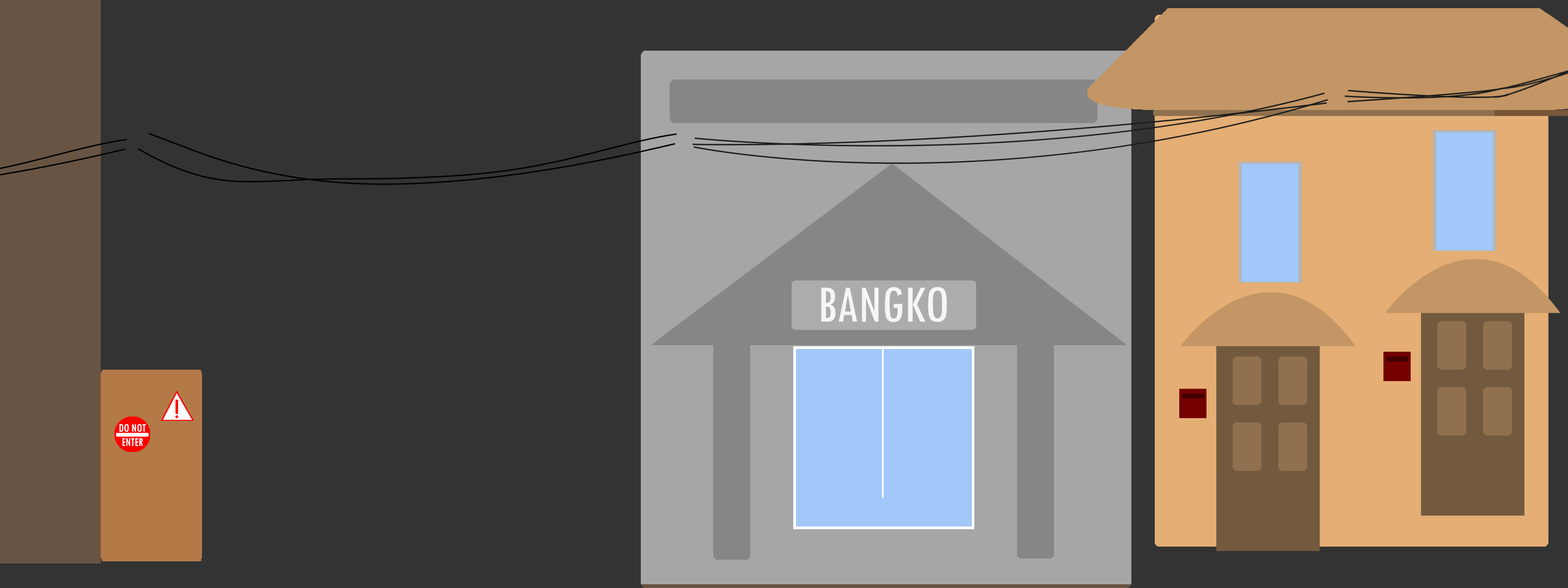
<style>
.page{position:relative;width:1568px;height:588px;background:#333333}
.page>*{position:absolute;margin:0}
.t1{font:54.4px "TwCenMT-Condensed";color:#f6f6f6}
.t2{font:29.9px "TwCenMT-Condensed";color:#ff0000}
</style>
<div class="page">
<p class="t1" style="left:821px;top:287px;width:126px;height:35px">BANGKO</p>
<p class="t2" style="left:175px;top:400px;width:4px;height:18px">!</p>
</div>
